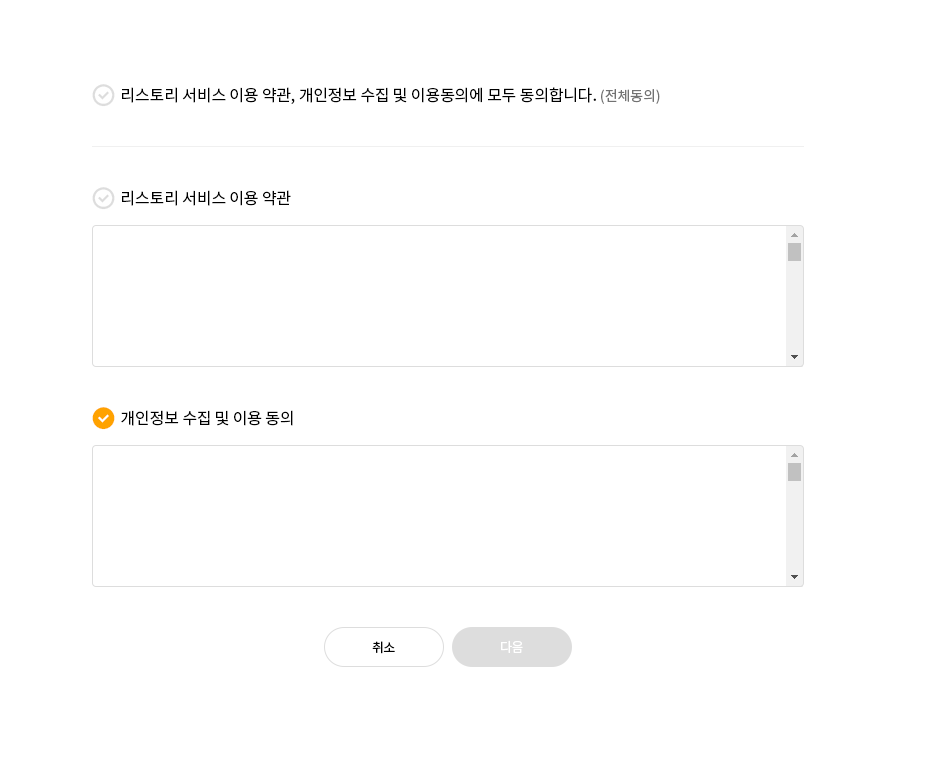
<style>
.page{position:relative;width:925px;height:759px;background:#ffffff}
.page>*{position:absolute;margin:0}
.t1{font:16px "NotoSansKR-Regular";letter-spacing:-0.01em;color:#000000}
.t2{font:14px "NotoSansKR-Regular";letter-spacing:-0.01em;color:#727272}
.t3{font:13px "NotoSansKR-Regular";letter-spacing:-0.05em;color:#000000}
.t4{font:13px "NotoSansKR-Regular";letter-spacing:-0.05em;color:#ffffff}
</style>
<div class="page">
<p class="t1" style="left:122px;top:87px;width:538px;height:17px">리스토리 서비스 이용 약관, 개인정보 수집 및 이용동의에 모두 동의합니다. <span class="t2">(전체동의)</span></p>
<p class="t1" style="left:122px;top:190px;width:169px;height:16px">리스토리 서비스 이용 약관</p>
<p class="t1" style="left:121px;top:410px;width:172px;height:16px">개인정보 수집 및 이용 동의</p>
<p class="t3" style="left:372px;top:641px;width:23px;height:13px">취소</p>
<p class="t4" style="left:501px;top:640px;width:22px;height:13px">다음</p>
</div>
